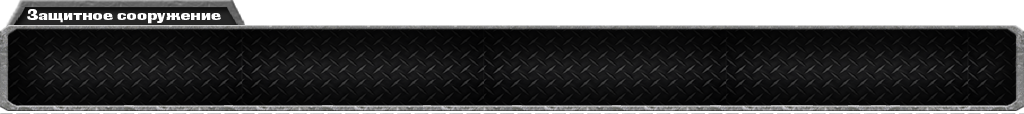
<style>
.page{position:relative;width:1024px;height:114px}
.page>*{position:absolute;margin:0}
.t1{font:15.2px "BlackGroteskC";color:#ffffff;scale:1.11 1}
</style>
<div class="page">
<p class="t1" style="left:27px;top:9px;width:194px;height:15px">Защитное сооружение</p>
</div>
